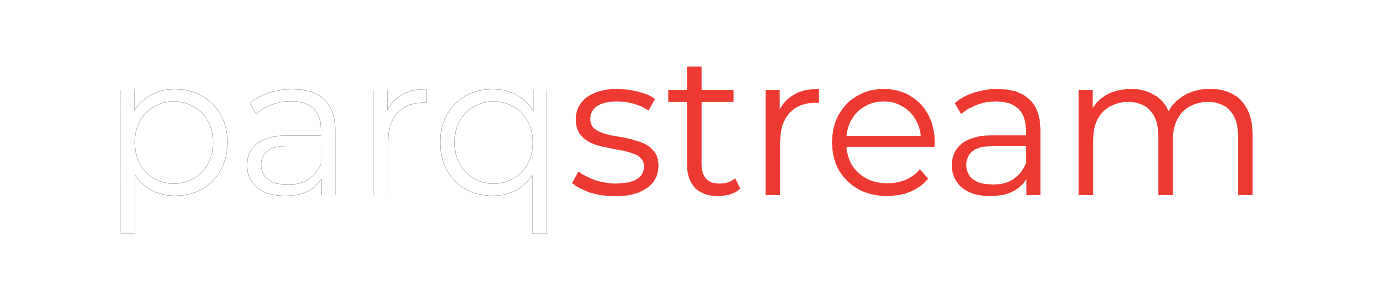
<style>
.page{position:relative;width:1375px;height:300px;background:#ffffff}
.page>*{position:absolute;margin:0}
.t1{font:200px "Montserrat-Regular"}
.t2{font:200px "Montserrat-Regular";color:#ee3932}
.t3{font:200px "Montserrat-Regular";color:#ffffff}
</style>
<div class="page">
<p class="t1" style="left:120px;top:66px;width:1133px;height:168px">parqstream</p>
<p class="t2" style="left:120px;top:66px;width:1133px;height:168px"><span class="t3">parq</span>stream</p>
</div>
